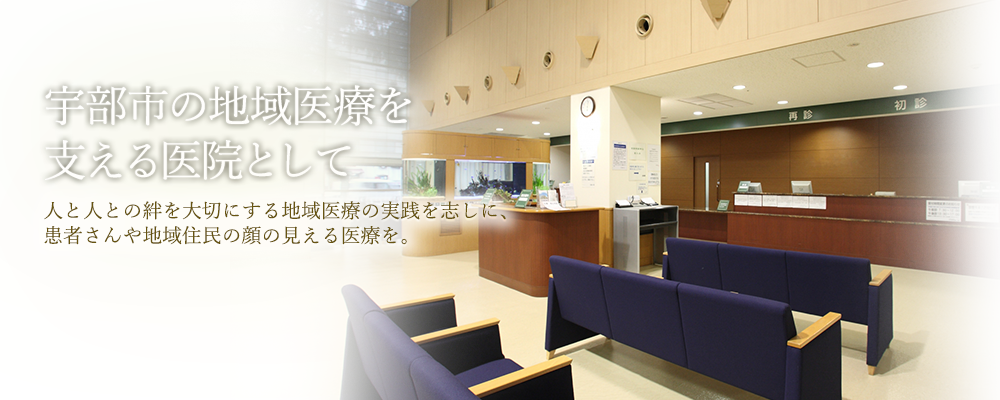
<style>
.page{position:relative;width:1000px;height:400px}
.page>*{position:absolute;margin:0}
.t1{font:43.6px/54.5px "YuMincho-Regular";color:#ffffff}
.t2{font:19.8px/24.8px "YuMincho-Regular";color:#675410}
</style>
<div class="page">
<p class="t1" style="left:45px;top:85px;width:366px;height:95px">宇部市の地域医療を<br>支える医院として</p>
<p class="t2" style="left:44px;top:201px;width:462px;height:44px">人と人との絆を大切にする地域医療の実践を志しに、<br>患者さんや地域住民の顔の見える医療を。</p>
</div>
